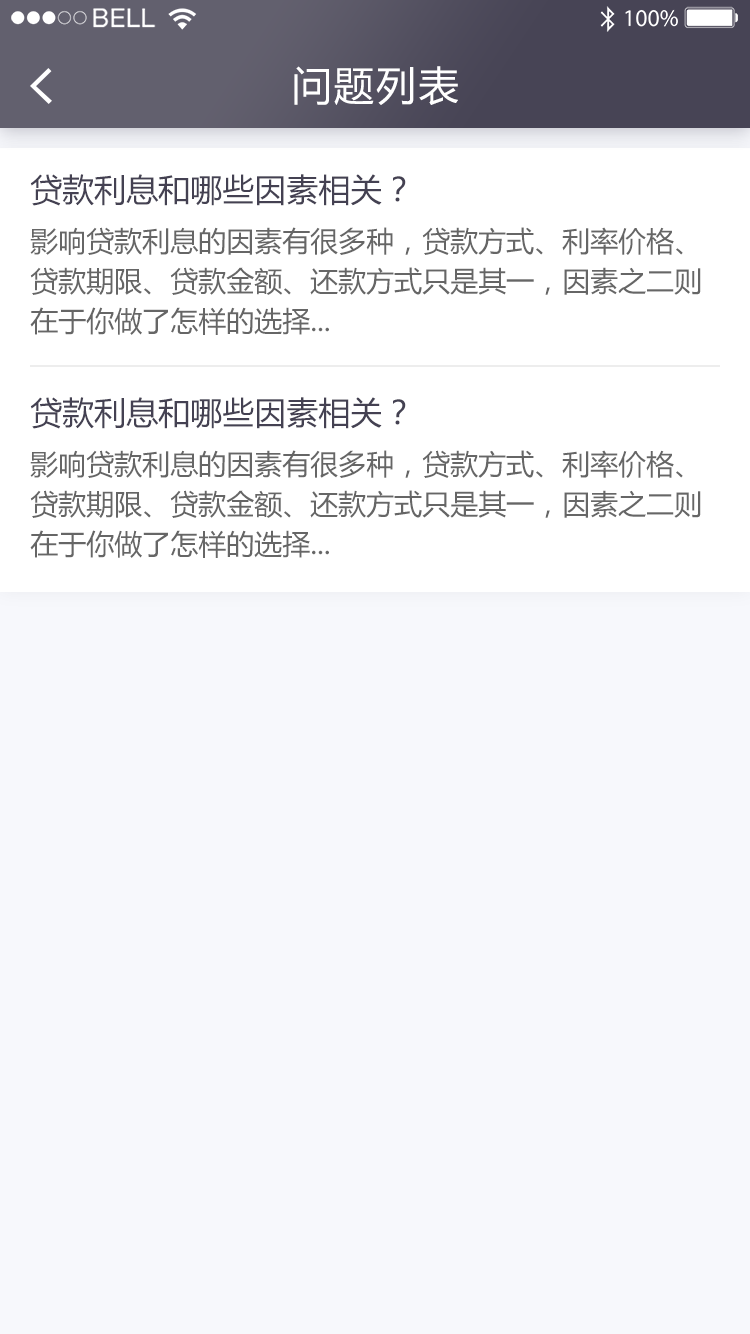
<style>
.page{position:relative;width:750px;height:1334px;background:#f7f8fc}
.page>*{position:absolute;margin:0}
.t1{font:40px "MicrosoftYaHei";letter-spacing:0.06em;color:#ffffff}
.t2{font:32px "MicrosoftYaHei";color:#444152}
.t3{font:28px/40px "MicrosoftYaHei";color:#666666}
</style>
<div class="page">
<p class="t1" style="left:294px;top:66px;width:164px;height:39px">问题列表</p>
<p class="t2" style="left:30px;top:174px;width:376px;height:32px">贷款利息和哪些因素相关？</p>
<p class="t3" style="left:30px;top:227px;width:671px;height:108px">影响贷款利息的因素有很多种，贷款方式、利率价格、<br>贷款期限、贷款金额、还款方式只是其一，因素之二则<br>在于你做了怎样的选择...</p>
<p class="t2" style="left:30px;top:397px;width:376px;height:32px">贷款利息和哪些因素相关？</p>
<p class="t3" style="left:30px;top:450px;width:671px;height:108px">影响贷款利息的因素有很多种，贷款方式、利率价格、<br>贷款期限、贷款金额、还款方式只是其一，因素之二则<br>在于你做了怎样的选择...</p>
</div>
